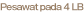
<style>
.page{position:relative;width:84px;height:15px;background:#ffffff}
.page>*{position:absolute;margin:0}
.t1{font:8.7px "GothicMB101Pro-DeBold";letter-spacing:-0.08em;color:#967c62}
</style>
<div class="page">
<p class="t1" style="left:0px;top:3px;width:84px;height:9px">Pesawat pada 4 LB</p>
</div>
